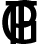
<style>
.page{position:relative;width:41px;height:44px;background:#000000}
.page>*{position:absolute;margin:0}
.t1{font:62px "MyriadPro-Regular";color:#000000}
</style>
<div class="page">
<p class="t1" style="left:2px;top:0px;width:35px;height:44px">G</p>
<p class="t1" style="left:5px;top:1px;width:32px;height:42px">T</p>
<p class="t1" style="left:10px;top:2px;width:27px;height:42px">P</p>
</div>
